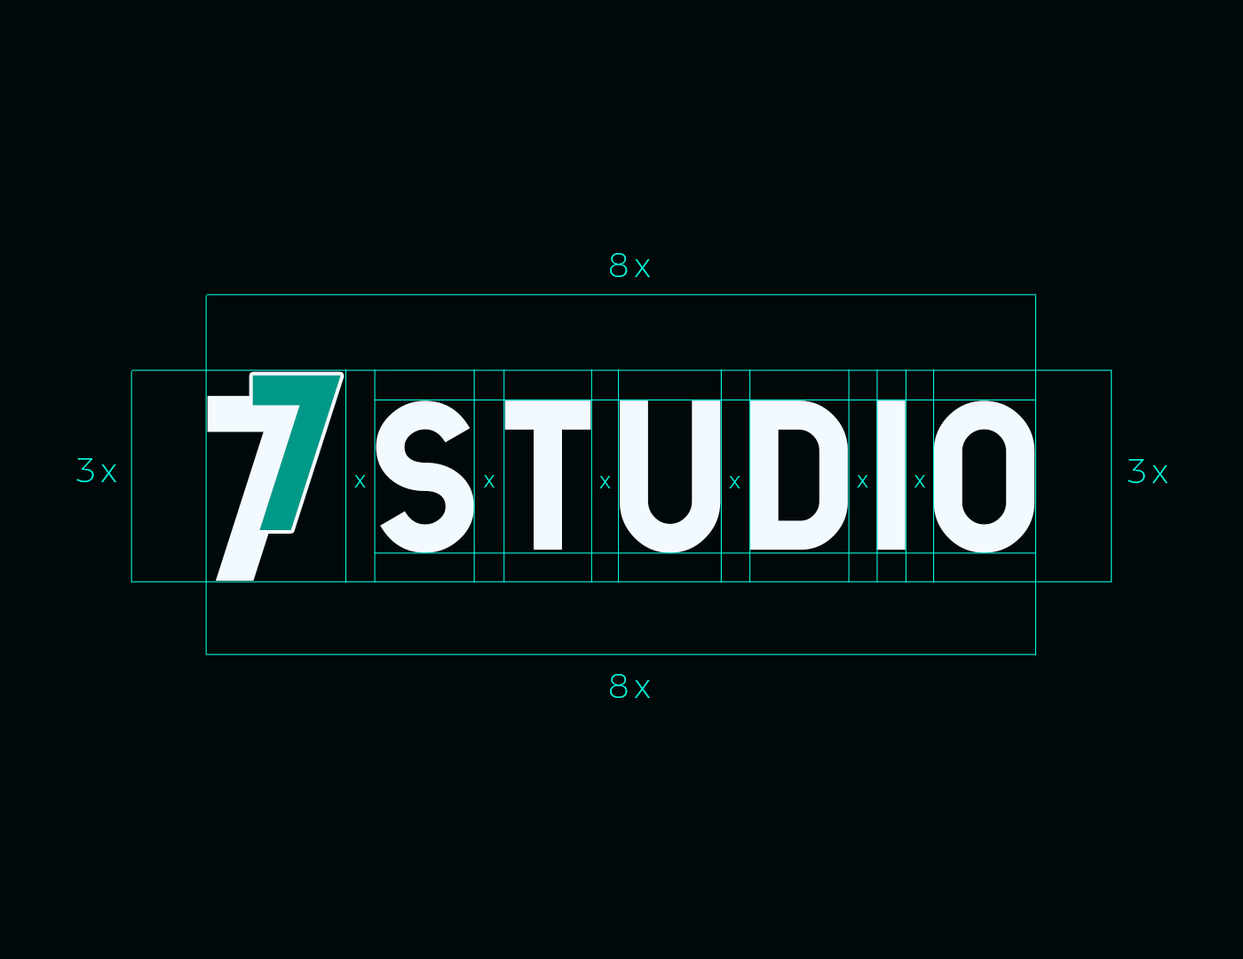
<style>
.page{position:relative;width:1243px;height:959px;background:#00080a}
.page>*{position:absolute;margin:0}
.t1{font:34px "ArgentumSans-ExtraLight";letter-spacing:0.135em;color:#00ffe1}
.t2{font:211.2px "Hansief";letter-spacing:0.135em;color:#009987}
.t3{font:252.2px "Hansief";letter-spacing:0.135em;color:#f3faff}
.t4{font:199.3px "Hansief";letter-spacing:0.135em;color:#f3faff}
.t5{font:203.3px "Hansief";letter-spacing:0.09em;color:#f3faff}
.t6{font:203.3px "Hansief";letter-spacing:0.035em;color:#f3faff}
.t7{font:203.3px "Hansief";letter-spacing:0.07em;color:#f3faff}
.t8{font:203.3px "Hansief";letter-spacing:0.055em;color:#f3faff}
.t9{font:22.8px "ArgentumSans-ExtraLight";letter-spacing:0.135em;color:#00ffe1}
</style>
<div class="page">
<p class="t1" style="left:610px;top:253px;width:40px;height:24px">8x</p>
<p class="t2" style="left:252px;top:375px;width:89px;height:155px">7</p>
<p class="t3" style="left:207px;top:395px;width:106px;height:186px">7</p>
<p class="t4" style="left:376px;top:401px;width:659px;height:152px">S<span class="t5">T</span><span class="t6">U</span><span class="t7">D</span><span class="t8">I</span>O</p>
<p class="t1" style="left:76px;top:458px;width:40px;height:24px">3x</p>
<p class="t1" style="left:1128px;top:459px;width:40px;height:24px">3x</p>
<p class="t9" style="left:354px;top:475px;width:12px;height:13px">x</p>
<p class="t9" style="left:484px;top:475px;width:11px;height:13px">x</p>
<p class="t9" style="left:599px;top:476px;width:12px;height:12px">x</p>
<p class="t9" style="left:729px;top:476px;width:12px;height:12px">x</p>
<p class="t9" style="left:857px;top:475px;width:12px;height:13px">x</p>
<p class="t9" style="left:915px;top:475px;width:10px;height:13px">x</p>
<p class="t1" style="left:610px;top:674px;width:40px;height:24px">8x</p>
</div>
